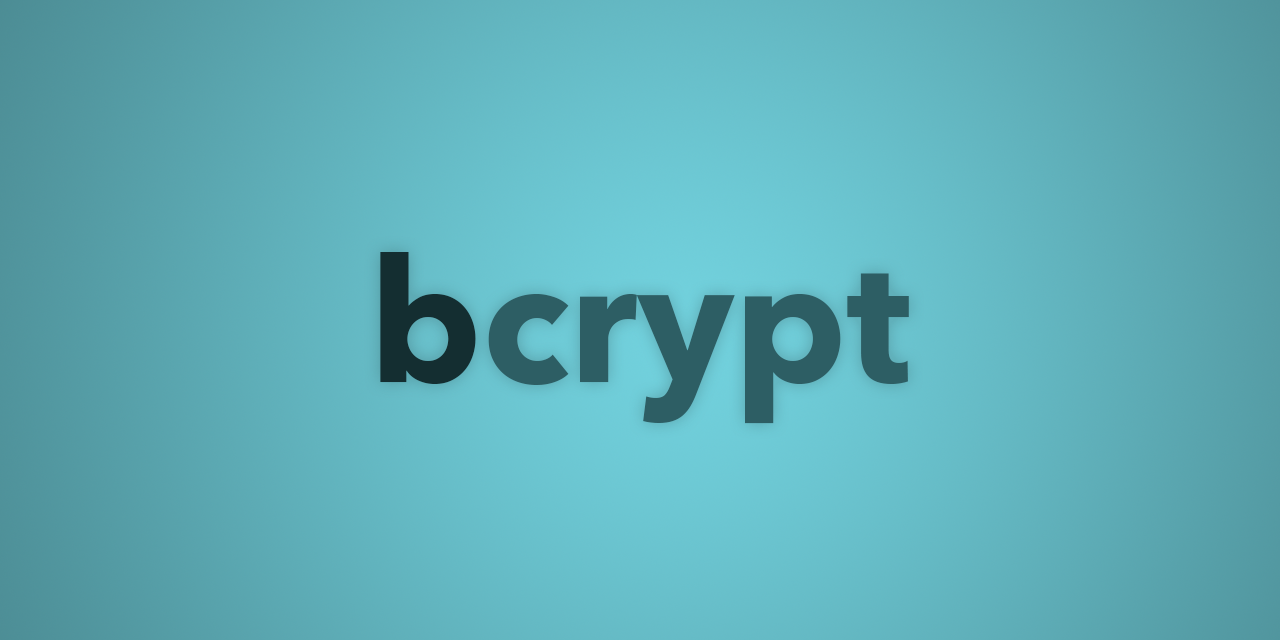
<style>
.page{position:relative;width:1280px;height:640px}
.page>*{position:absolute;margin:0}
.t1{font:172px "AvenirNext-Bold";color:#2d5e64}
.t2{font:172px "AvenirNext-Bold";color:#142e31}
</style>
<div class="page">
<p class="t1" style="left:380px;top:252px;width:529px;height:172px"><span class="t2">b</span>crypt</p>
</div>
